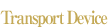
<style>
.page{position:relative;width:108px;height:27px;background:#ffffff}
.page>*{position:absolute;margin:0}
.t1{font:18px "RyuminPro-ExBold";letter-spacing:-0.1em;color:#c4a956;scale:0.87 1}
</style>
<div class="page">
<p class="t1" style="left:0px;top:10px;width:108px;height:17px">Transport Device</p>
</div>
